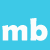
<style>
.page{position:relative;width:50px;height:50px;background:#3dc9e7}
.page>*{position:absolute;margin:0}
.t1{font:32px "BerlinSansFBDemi-Bold";color:#fcfcfc}
</style>
<div class="page">
<p class="t1" style="left:2px;top:18px;width:46px;height:23px">mb</p>
</div>
